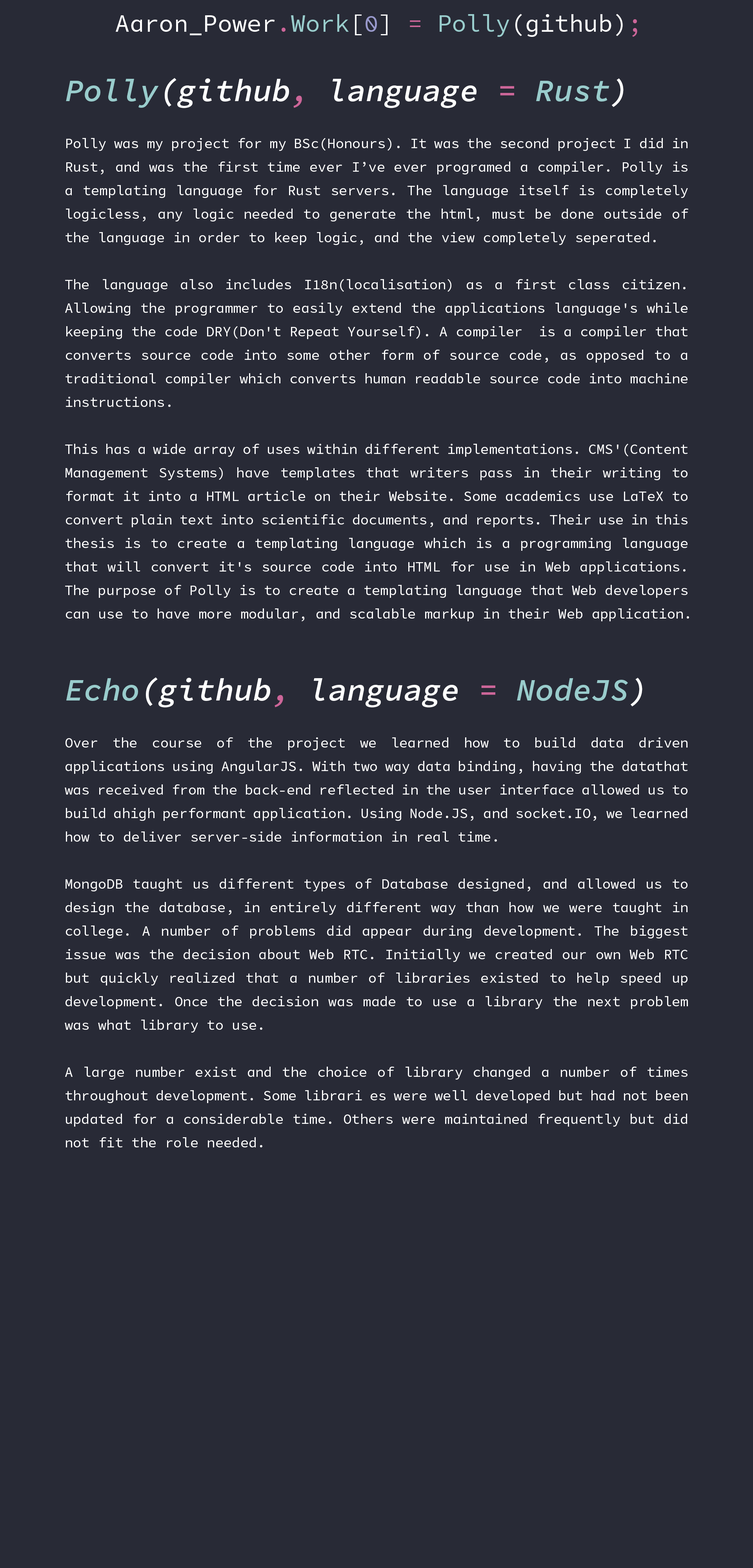
<style>
.page{position:relative;width:753px;height:1568px;background:#282a36}
.page>*{position:absolute;margin:0}
.t1{font:24.4px "SourceCodePro-Regular";color:#ffffff}
.t2{font:24.4px "SourceCodePro-Regular";color:#cc6699}
.t3{font:24.4px "SourceCodePro-Regular";color:#99cccc}
.t4{font:24.4px "SourceCodePro-Regular";color:#9999cc}
.t5{font:13.9px/23.5px "SourceCodePro-Regular";color:#ffffff}
.t6{font:31.4px/23.5px "SourceCodePro-SemiboldIt";color:#99cccc}
.t7{font:31.4px/23.5px "SourceCodePro-SemiboldIt";color:#ffffff}
.t8{font:31.4px/23.5px "SourceCodePro-SemiboldIt";color:#cc6699}
</style>
<div class="page">
<p class="t1" style="left:116px;top:14px;width:521px;height:23px">Aaron_Power<span class="t2">.</span><span class="t3">Work</span>[<span class="t4">0</span>] <span class="t2">= </span><span class="t3">Polly</span>(github)<span class="t2">;</span></p>
<p class="t5" style="left:65px;top:78px;width:624px;height:543px;text-align:justify"><span class="t6">Polly</span><span class="t7">(github</span><span class="t8">,</span><span class="t7"> language </span><span class="t8">= </span><span class="t6">Rust</span><span class="t7">)<br></span><br>Polly was my project for my BSc(Honours). It was the second project I did in Rust, and was the first time ever I’ve ever programed a compiler. Polly is a templating language for Rust servers. The language itself is completely logicless, any logic needed to generate the html, must be done outside of the language in order to keep logic, and the view completely seperated.<br><br>The language also includes I18n(localisation) as a first class citizen. Allowing the programmer to easily extend the applications language's while keeping the code DRY(Don't Repeat Yourself). A compiler  is a compiler that converts source code into some other form of source code, as opposed to a traditional compiler which converts human readable source code into machine instructions.<br><br>This has a wide array of uses within different implementations. CMS'(Content Management Systems) have templates that writers pass in their writing to format it into a HTML article on their Website. Some academics use LaTeX to convert plain text into scientific documents, and reports. Their use in this thesis is to create a templating language which is a programming language that will convert it's source code into HTML for use in Web applications. The purpose of Polly is to create a templating language that Web developers can use to have more modular, and scalable markup in their Web application.</p>
<p class="t5" style="left:65px;top:677px;width:623px;height:470px;text-align:justify"><span class="t6">Echo</span><span class="t7">(github</span><span class="t8">,</span><span class="t7"> language </span><span class="t8">= </span><span class="t6">NodeJS</span><span class="t7">)</span><br><br>Over the course of the project we learned how to build data driven applications using AngularJS. With two way data binding, having the datathat was received from the back-end reflected in the user interface allowed us to build ahigh performant application. Using Node.JS, and socket.IO, we learned how to deliver server-side information in real time.<br><br>MongoDB taught us different types of Database designed, and allowed us to design the database, in entirely different way than how we were taught in college. A number of problems did appear during development. The biggest issue was the decision about Web RTC. Initially we created our own Web RTC but quickly realized that a number of libraries existed to help speed up development. Once the decision was made to use a library the next problem was what library to use.<br><br>A large number exist and the choice of library changed a number of times throughout development. Some librari es were well developed but had not been updated for a considerable time. Others were maintained frequently but did not fit the role needed.</p>
</div>
